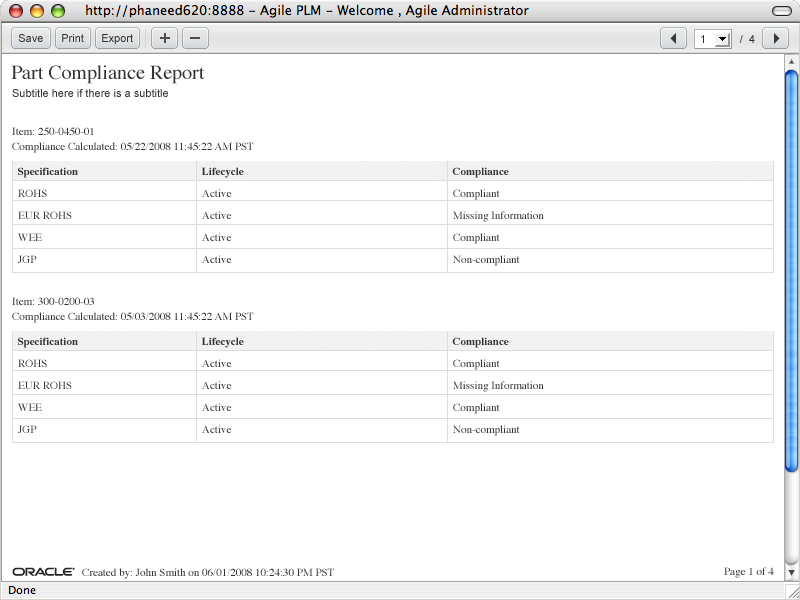
<style>
.page{position:relative;width:800px;height:600px;background:#ffffff}
.page>*{position:absolute;margin:0}
.t1{font:11px "ArialMT";color:#333333}
.t2{font:20px "Times-Roman";color:#333333}
.t3{font:11px "Times-Roman";color:#333333}
.t4{font:11px "Times-Bold";color:#333333}
.t5{font:11px/22px "Times-Roman";color:#333333}
</style>
<div class="page">
<p class="t1" style="left:18px;top:34px;width:25px;height:8px">Save</p>
<p class="t1" style="left:62px;top:34px;width:22px;height:8px">Print</p>
<p class="t1" style="left:102px;top:34px;width:31px;height:11px">Export</p>
<p class="t1" style="left:701px;top:35px;width:54px;height:8px">1           /  4</p>
<p class="t2" style="left:11px;top:65px;width:194px;height:19px">Part Compliance Report</p>
<p class="t1" style="left:12px;top:89px;width:156px;height:8px">Subtitle here if there is a subtitle</p>
<p class="t3" style="left:12px;top:127px;width:82px;height:8px">Item: 250-0450-01</p>
<p class="t3" style="left:12px;top:142px;width:242px;height:11px">Compliance Calculated: 05/22/2008 11:45:22 AM PST</p>
<p class="t4" style="left:18px;top:167px;width:60px;height:11px">Specification</p>
<p class="t4" style="left:201px;top:167px;width:43px;height:11px">Lifecycle</p>
<p class="t4" style="left:452px;top:167px;width:57px;height:11px">Compliance</p>
<p class="t5" style="left:18px;top:189px;width:54px;height:74px">ROHS<br>EUR ROHS<br>WEE<br>JGP</p>
<p class="t5" style="left:202px;top:189px;width:30px;height:74px">Active<br>Active<br>Active<br>Active</p>
<p class="t5" style="left:453px;top:189px;width:91px;height:77px">Compliant<br>Missing Information<br>Compliant<br>Non-compliant</p>
<p class="t3" style="left:12px;top:297px;width:82px;height:8px">Item: 300-0200-03</p>
<p class="t3" style="left:12px;top:312px;width:242px;height:11px">Compliance Calculated: 05/03/2008 11:45:22 AM PST</p>
<p class="t4" style="left:18px;top:337px;width:60px;height:11px">Specification</p>
<p class="t4" style="left:201px;top:337px;width:43px;height:11px">Lifecycle</p>
<p class="t4" style="left:452px;top:337px;width:57px;height:11px">Compliance</p>
<p class="t5" style="left:18px;top:359px;width:54px;height:74px">ROHS<br>EUR ROHS<br>WEE<br>JGP</p>
<p class="t5" style="left:202px;top:359px;width:30px;height:74px">Active<br>Active<br>Active<br>Active</p>
<p class="t5" style="left:453px;top:359px;width:91px;height:77px">Compliant<br>Missing Information<br>Compliant<br>Non-compliant</p>
<p class="t3" style="left:82px;top:568px;width:252px;height:11px">Created by: John Smith on 06/01/2008 10:24:30 PM PST</p>
<p class="t3" style="left:724px;top:567px;width:50px;height:11px">Page 1 of 4</p>
</div>
